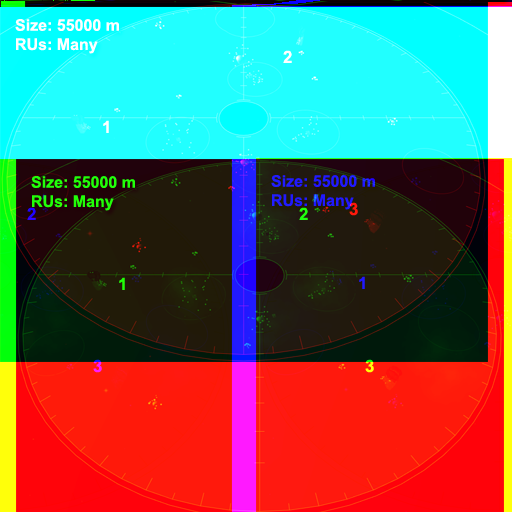
<style>
.page{position:relative;width:512px;height:512px}
.page>*{position:absolute;margin:0}
.t1{font:16px "Arial-BoldMT"}
.t2{font:17px "Arial-BoldMT"}
</style>
<div class="page">
<p class="t1" style="left:15px;top:17px;width:104px;height:35px">Size: 55000 m<br>RUs: Many</p>
<p class="t2" style="left:103px;top:118px;width:6px;height:13px">1</p>
</div>
